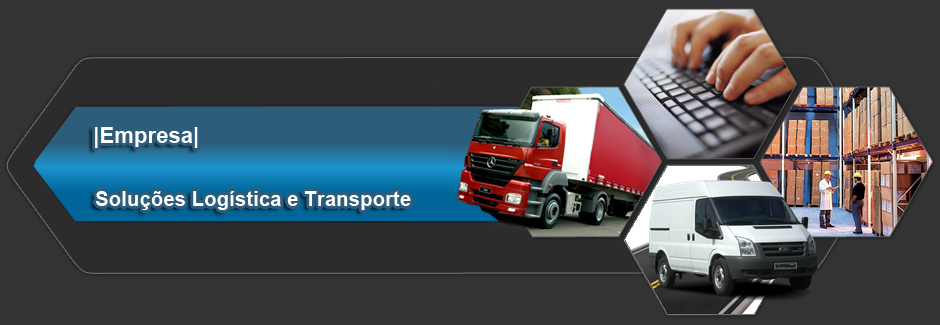
<style>
.page{position:relative;width:940px;height:325px;background:#333333}
.page>*{position:absolute;margin:0}
.t1{font:22.1px "Arial-BoldMT";color:#ffffff}
.t2{font:20.5px "Arial-BoldMT";color:#ffffff}
</style>
<div class="page">
<p class="t1" style="left:95px;top:127px;width:103px;height:21px">|Empresa|</p>
<p class="t2" style="left:96px;top:191px;width:315px;height:19px">Soluções Logística e Transporte</p>
</div>
